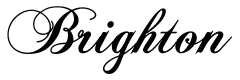
<style>
.page{position:relative;width:240px;height:80px;background:#ffffff}
.page>*{position:absolute;margin:0}
.t1{font:67.9px "ChopinScript";color:#040404}
</style>
<div class="page">
<p class="t1" style="left:7px;top:6px;width:225px;height:68px">Brighton</p>
</div>
